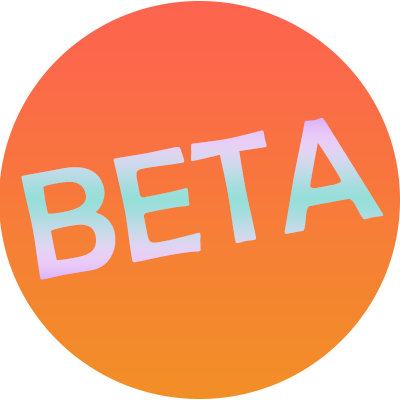
<style>
.page{position:relative;width:400px;height:400px;background:#ffffff}
.page>*{position:absolute;margin:0}
.t1{font:153.8px "BerlinSansFB-Reg"}
</style>
<div class="page">
<p class="t1" style="left:21px;top:118px;width:363px;height:162px;rotate:-11deg">BETA</p>
</div>
